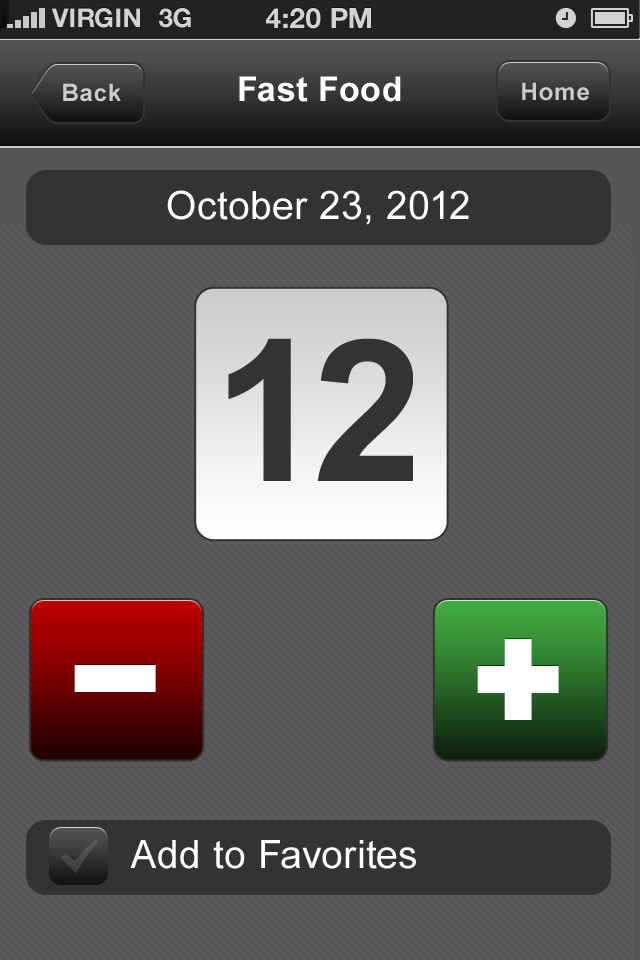
<style>
.page{position:relative;width:640px;height:960px}
.page>*{position:absolute;margin:0}
.t1{font:26px "HelveticaNeue-Bold";color:#d3d3d3;text-transform:uppercase}
.t2{font:28px "HelveticaNeue-Bold";color:#d3d3d3;text-transform:uppercase}
.t3{font:34px "Arial-BoldMT";letter-spacing:0.02em;color:#ffffff}
.t4{font:24px "Arial-BoldMT";letter-spacing:0.02em;color:#cccccc}
.t5{font:39px "ArialMT";letter-spacing:0.02em;color:#ffffff}
.t6{font:197.8px "Arial-BoldMT";letter-spacing:0.02em;color:#333333}
</style>
<div class="page">
<p class="t1" style="left:51px;top:8px;width:89px;height:20px">VIRGIN</p>
<p class="t1" style="left:159px;top:8px;width:32px;height:20px">3G</p>
<p class="t2" style="left:266px;top:8px;width:105px;height:21px">4:20 pM</p>
<p class="t3" style="left:239px;top:76px;width:162px;height:26px">Fast Food</p>
<p class="t4" style="left:63px;top:83px;width:58px;height:19px">Back</p>
<p class="t4" style="left:522px;top:82px;width:67px;height:19px">Home</p>
<p class="t5" style="left:167px;top:190px;width:302px;height:35px">October 23, 2012</p>
<p class="t6" style="left:228px;top:338px;width:185px;height:143px">12</p>
<p class="t5" style="left:130px;top:840px;width:286px;height:29px">Add to Favorites</p>
</div>
